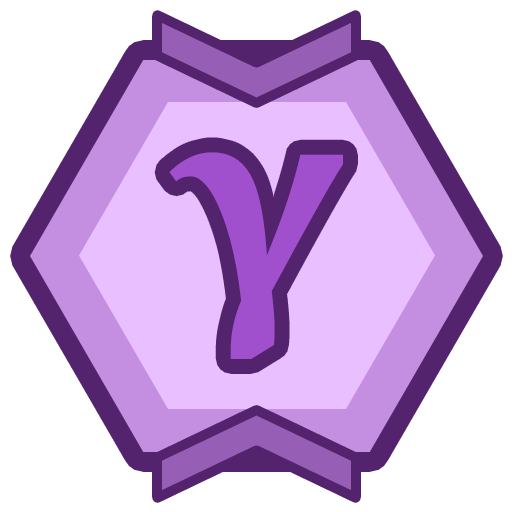
<style>
.page{position:relative;width:512px;height:512px;background:#ffffff}
.page>*{position:absolute;margin:0}
.t1{font:300px "Cambria-Bold";color:#a050cc}
</style>
<div class="page">
<p class="t1" style="left:169px;top:152px;width:174px;height:207px">γ</p>
</div>
